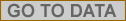
<style>
.page{position:relative;width:126px;height:21px;background:#cccccc}
.page>*{position:absolute;margin:0}
.t1{font:18px "Arial-BoldMT";color:#666666}
.t2{font:258.5px "GloucesterMT-ExtraCondensed";color:#666666}
</style>
<div class="page">
<p class="t1" style="left:7px;top:3px;width:110px;height:15px">GO TO DATA <span class="t2">GO</span></p>
</div>
